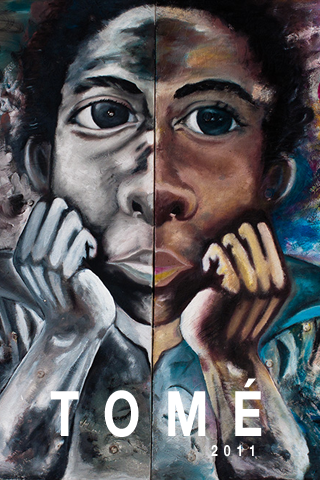
<style>
.page{position:relative;width:320px;height:480px}
.page>*{position:absolute;margin:0}
.t1{font:62.4px "HelveticaNeue-Bold";letter-spacing:0.5em;color:#ffffff;scale:0.77 1}
.t2{font:15.6px "HelveticaNeue-Bold";letter-spacing:0.5em;color:#ffffff;scale:0.77 1}
</style>
<div class="page">
<p class="t1" style="left:50px;top:378px;width:212px;height:59px">TOMÉ</p>
<p class="t2" style="left:211px;top:445px;width:43px;height:12px">2011</p>
</div>
